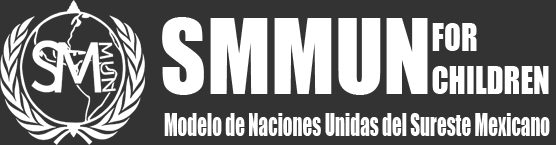
<style>
.page{position:relative;width:556px;height:145px;background:#333333}
.page>*{position:absolute;margin:0}
.t1{font:96px "Impact";color:#ffffff;scale:0.93 1}
.t2{font:35.7px "Impact";color:#ffffff;scale:0.87 1}
.t3{font:28.6px "Impact";color:#ffffff;scale:0.67 1}
</style>
<div class="page">
<p class="t1" style="left:162px;top:17px;width:266px;height:78px">SMMUN</p>
<p class="t2" style="left:432px;top:23px;width:117px;height:71px">FOR<br>CHILDREN</p>
<p class="t3" style="left:164px;top:113px;width:386px;height:23px">Modelo de Naciones Unidas del Sureste Mexicano</p>
</div>
